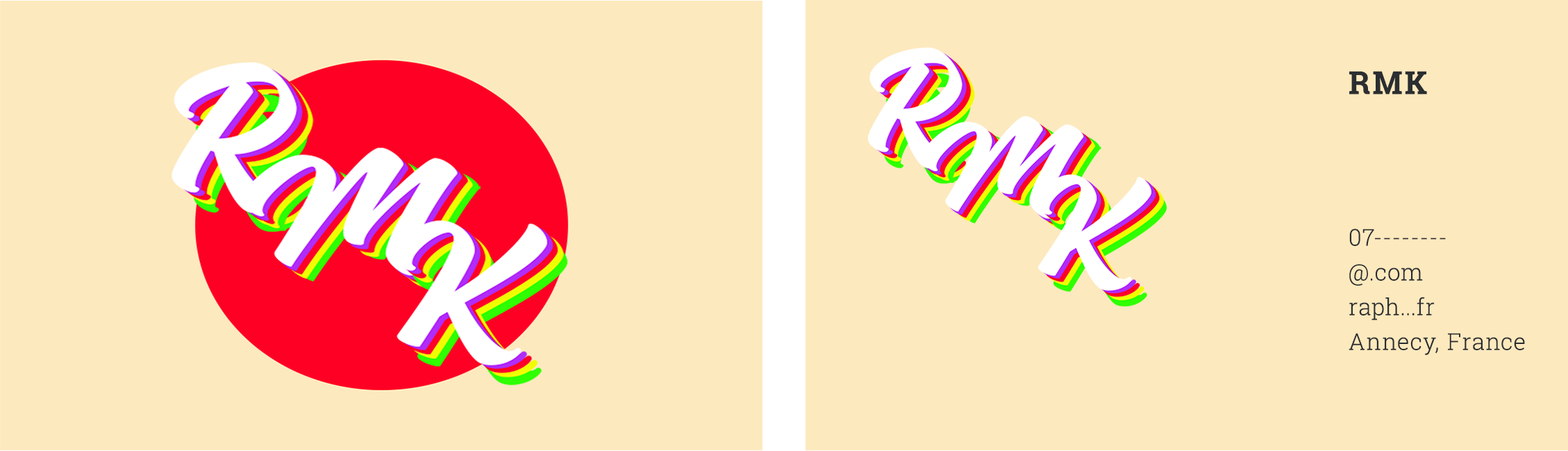
<style>
.page{position:relative;width:1568px;height:451px;background:#fde9be}
.page>*{position:absolute;margin:0}
.t1{font:31.8px "RobotoSlab-Bold";letter-spacing:0.075em;color:#2b2e31;text-transform:uppercase}
.t2{font:23.1px/34.7px "RobotoSlab-Light";letter-spacing:0.05em;color:#2b2e31}
</style>
<div class="page">
<p class="t1" style="left:1349px;top:71px;width:78px;height:23px">RMK</p>
<p class="t2" style="left:1349px;top:228px;width:176px;height:127px">07--------<br>@.com<br>raph...fr <br>Annecy, France</p>
</div>
